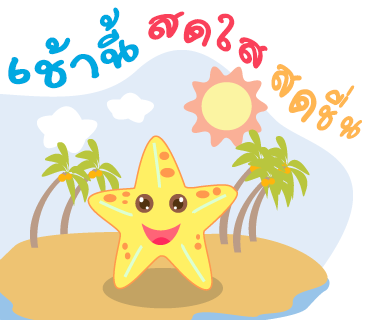
<style>
.page{position:relative;width:370px;height:320px;background:#ffffff}
.page>*{position:absolute;margin:0}
.t1{font:80px "2005_iannnnnMTV";color:#00a8e1;scale:0.96 1}
.t2{font:65px "2005_iannnnnMTV";color:#00a8e1;scale:1.06 1}
.t3{font:70px "2005_iannnnnMTV";letter-spacing:0.025em;color:#fa405a;scale:1.26 1}
.t4{font:65px "2005_iannnnnMTV";letter-spacing:0.025em;color:#fa405a;scale:1.26 1}
.t5{font:55px "2005_iannnnnMTV";letter-spacing:0.025em;color:#ffb652;scale:1.06 1}
.t6{font:60px "2005_iannnnnMTV";letter-spacing:0.025em;color:#ffb652;scale:1.26 1}
</style>
<div class="page">
<p class="t1" style="left:8px;top:7px;width:131px;height:82px;rotate:-14deg">เช้า<span class="t2">นี้</span></p>
<p class="t3" style="left:148px;top:11px;width:120px;height:58px;rotate:15deg">สด<span class="t4">ใส</span></p>
<p class="t5" style="left:271px;top:64px;width:91px;height:75px;rotate:34deg"><span class="t6">สด</span>ชื่น</p>
</div>
